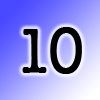
<style>
.page{position:relative;width:100px;height:100px}
.page>*{position:absolute;margin:0}
.t1{font:64.8px "AmericanTypewriter";color:#000000;font-weight:bold;scale:0.84 1}
</style>
<div class="page">
<p class="t1" style="left:22px;top:27px;width:60px;height:47px">10</p>
</div>
